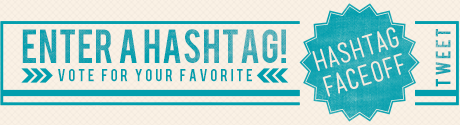
<style>
.page{position:relative;width:460px;height:125px;background:#faf1e5}
.page>*{position:absolute;margin:0}
.t1{font:37.2px "Bebas";letter-spacing:0.02em;scale:0.94 1}
.t2{font:27.5px/27.5px "MenschRegular";color:#f3ebdf}
.t3{font:16.5px "Bebas";letter-spacing:0.12em;scale:1.11 1}
.t4{font:13.8px "Bebas";letter-spacing:0.2em;color:#019ead}
</style>
<div class="page">
<p class="t1" style="left:22px;top:29px;width:264px;height:34px">Enter a hashtag!</p>
<p class="t2" style="left:312px;top:27px;width:92px;height:70px;text-align:center;rotate:-17deg">hashtag<br>faceoff</p>
<p class="t3" style="left:435px;top:29px;width:16px;height:58px;rotate:-90deg">tweet</p>
<p class="t4" style="left:58px;top:69px;width:194px;height:13px">vote for your favorite</p>
</div>
